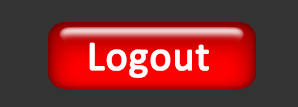
<style>
.page{position:relative;width:298px;height:107px;background:#333333}
.page>*{position:absolute;margin:0}
.t1{font:41.7px "Calibri";color:#ffffff;font-weight:bold}
</style>
<div class="page">
<p class="t1" style="left:89px;top:42px;width:120px;height:36px">Logout</p>
</div>
